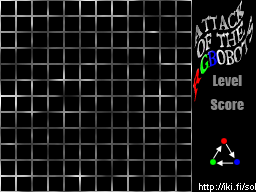
<style>
.page{position:relative;width:256px;height:192px;background:#000000}
.page>*{position:absolute;margin:0}
.t1{font:14.7px "Bedbug";scale:0.85 1}
.t2{font:14px "Impact";color:#898989}
.t3{font:9px "ArialMT";color:#ffffff}
</style>
<div class="page">
<p class="t1" style="left:193px;top:0px;width:61px;height:102px;text-align:center;rotate:-52deg">Attack<br>of the<br>RGBobots</p>
<p class="t2" style="left:213px;top:75px;width:29px;height:11px">Level</p>
<p class="t2" style="left:210px;top:99px;width:34px;height:11px">Score</p>
<p class="t3" style="left:199px;top:183px;width:57px;height:9px">http://iki.fi/sol</p>
</div>
